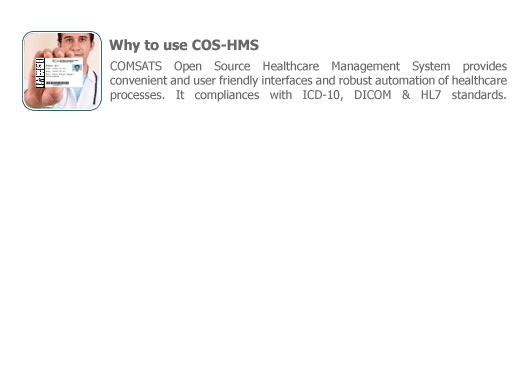
<style>
.page{position:relative;width:524px;height:387px;background:#ffffff}
.page>*{position:absolute;margin:0}
.t1{font:14px "Tahoma-Bold";color:#686868}
.t2{font:12px "Tahoma";color:#686868}
</style>
<div class="page">
<p class="t1" style="left:109px;top:39px;width:150px;height:14px">Why to use COS-HMS</p>
<p class="t2" style="left:110px;top:61px;width:397px;height:41px;text-align:justify">COMSATS Open Source Healthcare Management System provides convenient and user friendly interfaces and robust automation of healthcare processes. It compliances with ICD-10, DICOM &amp; HL7 standards.</p>
</div>
